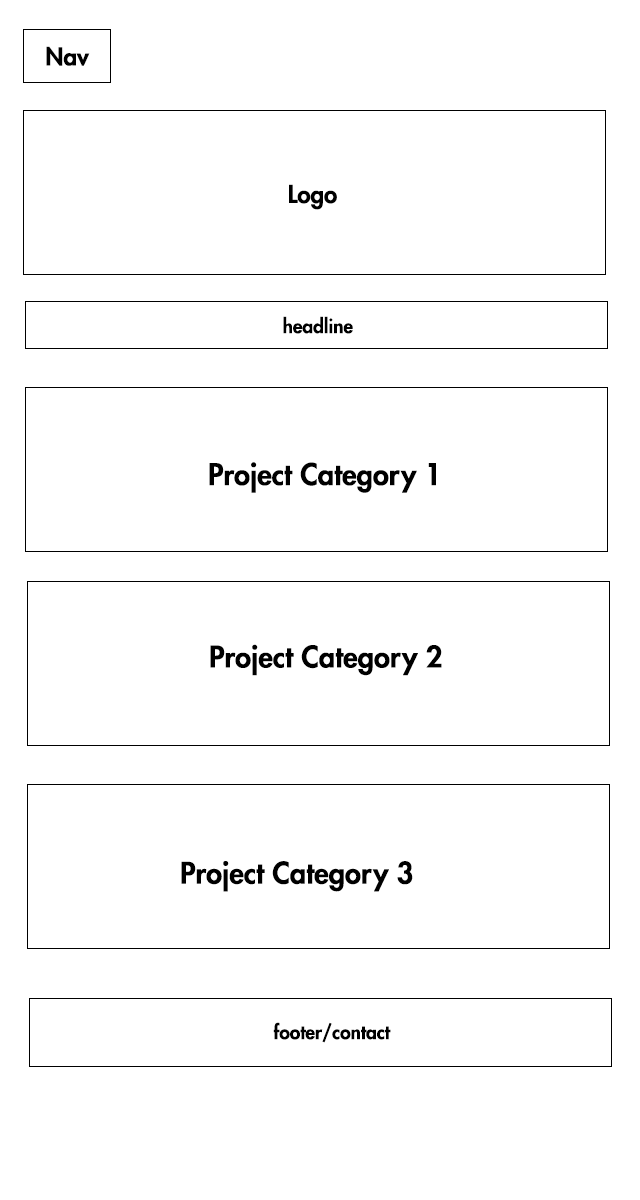
<style>
.page{position:relative;width:640px;height:1200px;background:#ffffff}
.page>*{position:absolute;margin:0}
.t1{font:24px "FuturaStd-Heavy";color:#000000}
.t2{font:19px "FuturaStd-Heavy";color:#000000}
.t3{font:29px "FuturaStd-Heavy";color:#000000}
</style>
<div class="page">
<p class="t1" style="left:46px;top:46px;width:44px;height:20px">Nav</p>
<p class="t1" style="left:289px;top:184px;width:48px;height:26px">Logo</p>
<p class="t2" style="left:283px;top:316px;width:70px;height:18px">headline</p>
<p class="t3" style="left:209px;top:462px;width:227px;height:31px">Project Category 1</p>
<p class="t3" style="left:210px;top:644px;width:232px;height:32px">Project Category 2</p>
<p class="t3" style="left:181px;top:861px;width:232px;height:31px">Project Category 3</p>
<p class="t2" style="left:273px;top:1022px;width:118px;height:21px">footer/contact</p>
</div>
